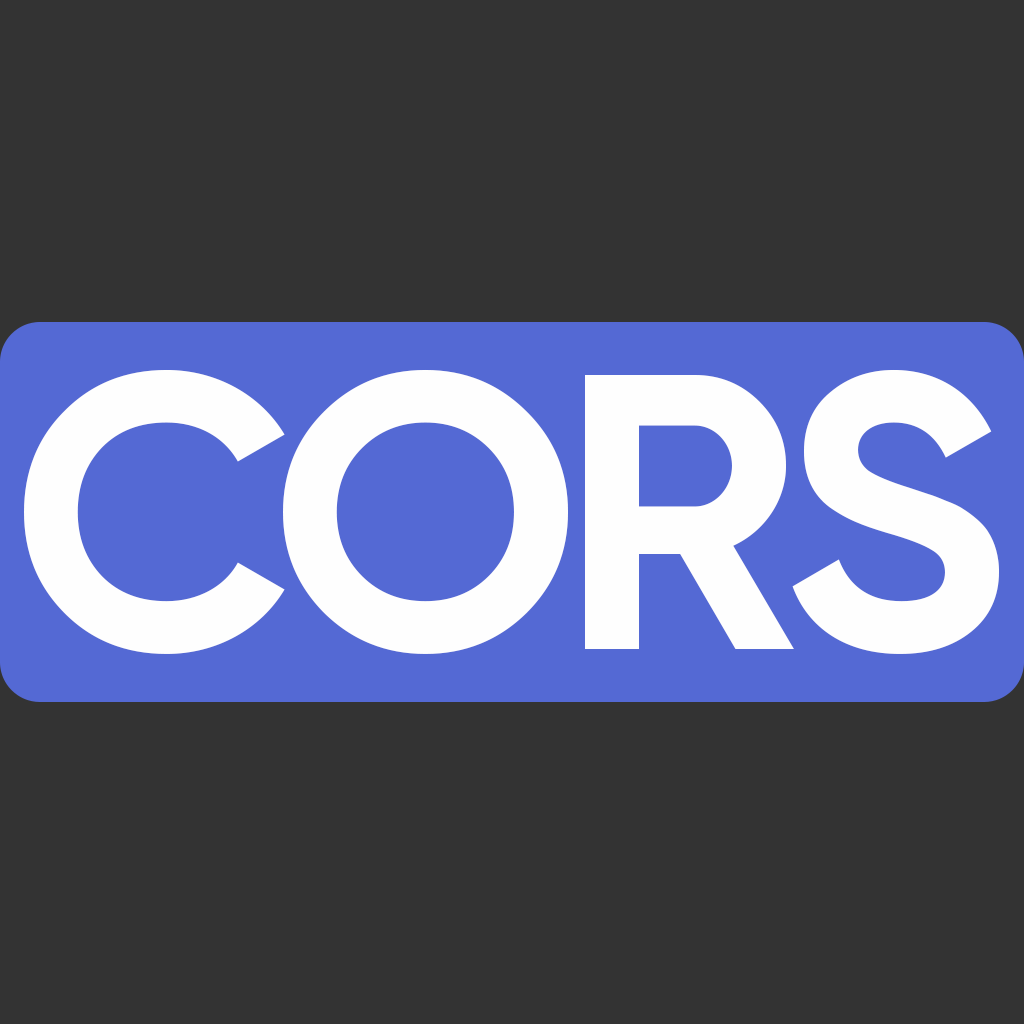
<style>
.page{position:relative;width:1024px;height:1024px;background:#333333}
.page>*{position:absolute;margin:0}
.t1{font:391.6px "Gilroy-Bold";letter-spacing:-0.06em;color:#fefefe;text-transform:uppercase}
</style>
<div class="page">
<p class="t1" style="left:24px;top:369px;width:975px;height:285px">CORS</p>
</div>
